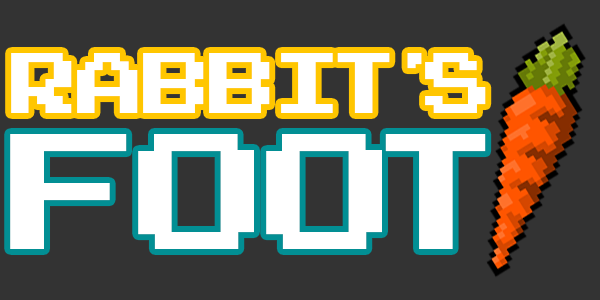
<style>
.page{position:relative;width:600px;height:300px;background:#333333}
.page>*{position:absolute;margin:0}
.t1{font:120.4px "8bitemul8r";color:#ffffff}
.t2{font:232.3px "8bitemul8r";color:#ffffff}
</style>
<div class="page">
<p class="t1" style="left:11px;top:53px;width:475px;height:60px">Rabbit’s</p>
<p class="t2" style="left:10px;top:134px;width:476px;height:115px">Foot</p>
</div>
